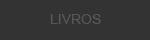
<style>
.page{position:relative;width:150px;height:40px;background:#333333}
.page>*{position:absolute;margin:0}
.t1{font:14px "ArialMT";color:#575555}
</style>
<div class="page">
<p class="t1" style="left:50px;top:14px;width:51px;height:10px">LIVROS</p>
</div>
